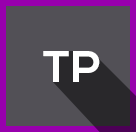
<style>
.page{position:relative;width:136px;height:132px;background:#525056}
.page>*{position:absolute;margin:0}
.t1{font:44px "NexaBold";color:#ffffff}
</style>
<div class="page">
<p class="t1" style="left:43px;top:51px;width:57px;height:31px">TP</p>
</div>
